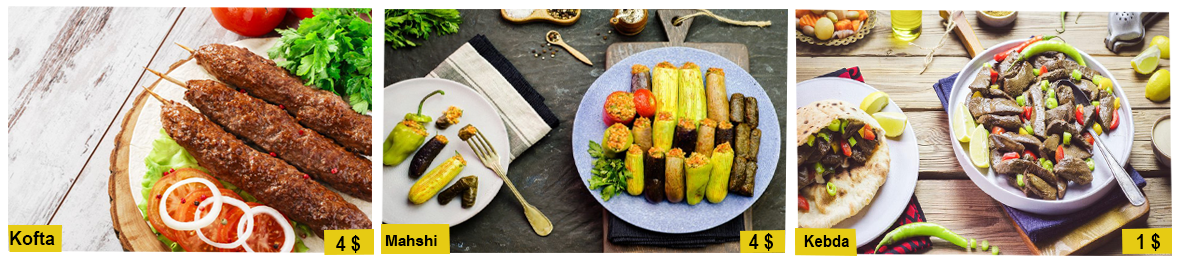
<style>
.page{position:relative;width:1180px;height:260px}
.page>*{position:absolute;margin:0}
.t1{font:18.7px "ArialNarrow-Bold";color:#000000;scale:1.17 1}
.t2{font:20.8px "ArialNarrow-Bold";color:#000000;scale:1.05 1}
.t3{font:15.8px "ArialNarrow-Bold";color:#000000;scale:1.17 1}
.t4{font:17.5px "ArialNarrow-Bold";color:#000000;scale:1.05 1}
</style>
<div class="page">
<p class="t1" style="left:10px;top:231px;width:45px;height:14px">Kofta</p>
<p class="t2" style="left:749px;top:233px;width:24px;height:18px">4 $</p>
<p class="t2" style="left:1137px;top:233px;width:23px;height:18px">1 $</p>
<p class="t2" style="left:336px;top:235px;width:24px;height:18px">4 $</p>
<p class="t3" style="left:385px;top:235px;width:52px;height:11px">Mahshi</p>
<p class="t4" style="left:804px;top:235px;width:45px;height:12px">Kebda</p>
</div>
